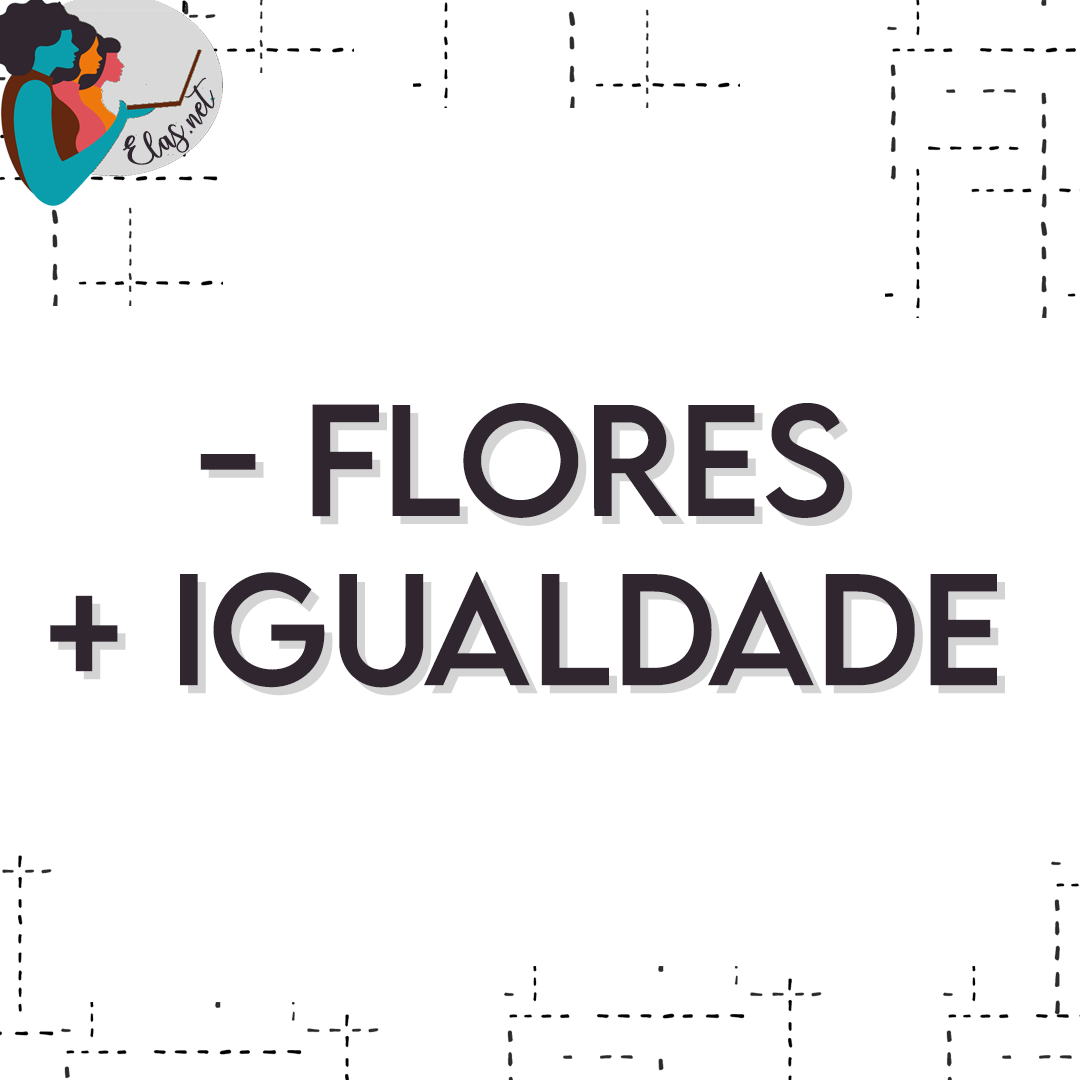
<style>
.page{position:relative;width:1080px;height:1080px;background:#ffffff}
.page>*{position:absolute;margin:0}
.t1{font:25.6px "charlinda-Regular";color:#2f262f;scale:1.18 1}
.t2{font:141px "LEMONMILK-Regular";color:#2f262f}
.t3{font:141px "LEMONMILK-Regular"}
</style>
<div class="page">
<p class="t1" style="left:123px;top:77px;width:92px;height:88px;rotate:-41deg">Elas.net</p>
<p class="t2" style="left:50px;top:403px;width:947px;height:285px;text-align:center">- Flores<br>+ Igualdade</p>
<p class="t3" style="left:58px;top:411px;width:947px;height:285px;text-align:center">- Flores<br>+ Igualdade</p>
</div>
